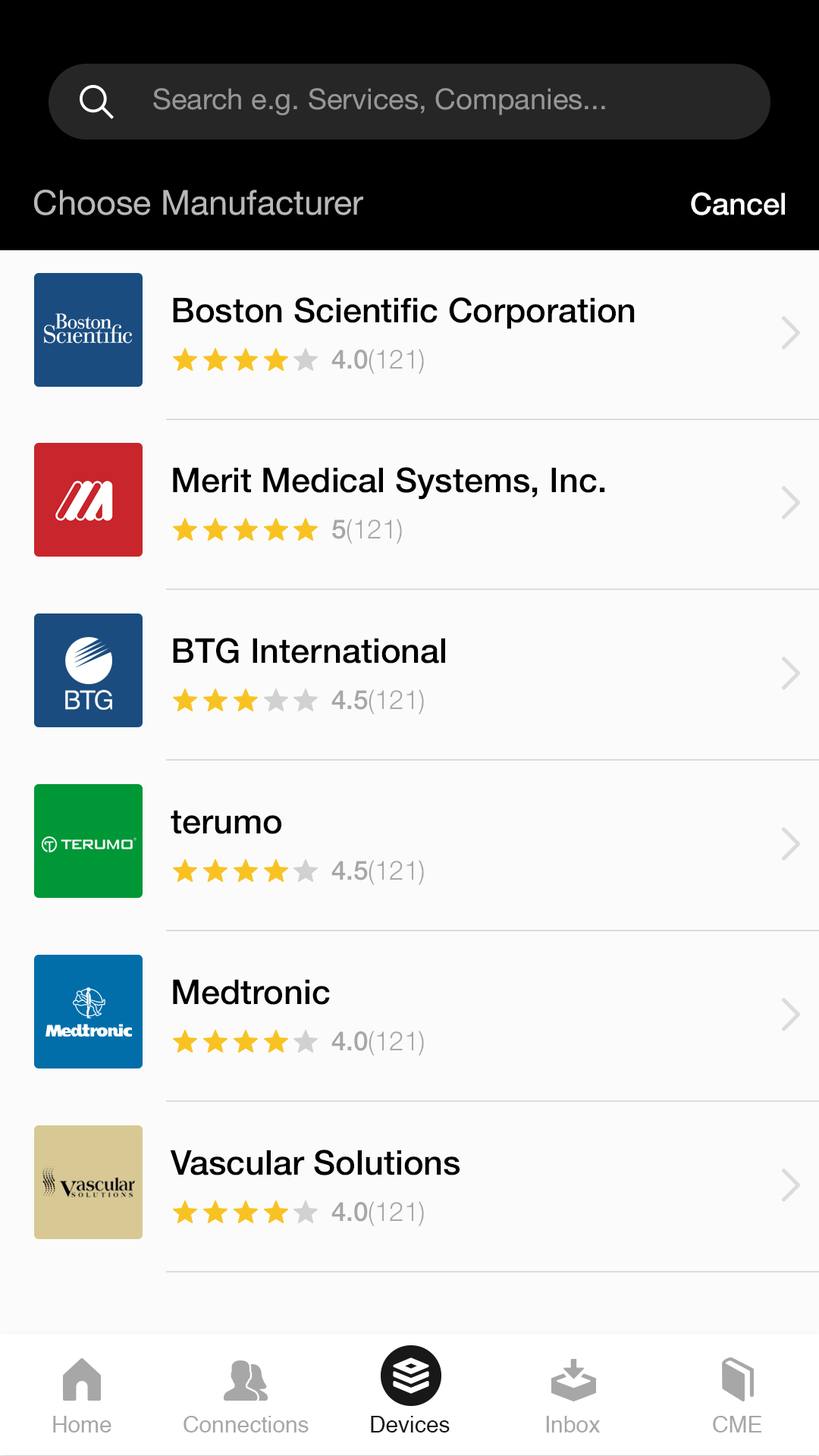
<style>
.page{position:relative;width:819px;height:1456px;background:#fbfbfb}
.page>*{position:absolute;margin:0}
.t1{font:28.8px "HelveticaNeue";color:#969696}
.t2{font:34.1px "HelveticaNeue";color:#b8b8b8}
.t3{font:30.4px "HelveticaNeue-Medium";color:#ffffff}
.t4{font:34.1px "HelveticaNeue-Medium";color:#000000}
.t5{font:26.5px "HelveticaNeue-Light";color:#a7a7a7}
.t6{font:26.5px "HelveticaNeue-Medium";color:#a7a7a7}
.t7{font:22.7px "Helvetica";color:#a7a7a7}
.t8{font:22.7px "Helvetica";color:#181818}
</style>
<div class="page">
<p class="t1" style="left:153px;top:88px;width:452px;height:27px">Search e.g. Services, Companies...</p>
<p class="t2" style="left:34px;top:190px;width:329px;height:25px">Choose Manufacturer</p>
<p class="t3" style="left:691px;top:192px;width:94px;height:23px">Cancel</p>
<p class="t4" style="left:173px;top:297px;width:462px;height:32px">Boston Scientific Corporation</p>
<p class="t5" style="left:331px;top:349px;width:93px;height:25px"><span class="t6">4.0</span>(121)</p>
<p class="t4" style="left:173px;top:467px;width:432px;height:33px">Merit Medical Systems, Inc.</p>
<p class="t5" style="left:332px;top:519px;width:70px;height:25px"><span class="t6">5</span>(121)</p>
<p class="t4" style="left:173px;top:638px;width:272px;height:26px">BTG International</p>
<p class="t5" style="left:331px;top:689px;width:93px;height:25px"><span class="t6">4.5</span>(121)</p>
<p class="t4" style="left:171px;top:810px;width:110px;height:24px">terumo</p>
<p class="t5" style="left:331px;top:860px;width:93px;height:25px"><span class="t6">4.5</span>(121)</p>
<p class="t4" style="left:173px;top:979px;width:157px;height:26px">Medtronic</p>
<p class="t5" style="left:331px;top:1031px;width:93px;height:25px"><span class="t6">4.0</span>(121)</p>
<p class="t4" style="left:170px;top:1150px;width:290px;height:25px">Vascular Solutions</p>
<p class="t5" style="left:331px;top:1201px;width:93px;height:25px"><span class="t6">4.0</span>(121)</p>
<p class="t7" style="left:53px;top:1416px;width:58px;height:16px">Home</p>
<p class="t7" style="left:184px;top:1416px;width:125px;height:16px">Connections</p>
<p class="t8" style="left:371px;top:1416px;width:79px;height:16px">Devices</p>
<p class="t7" style="left:546px;top:1416px;width:54px;height:16px">Inbox</p>
<p class="t7" style="left:713px;top:1416px;width:48px;height:16px">CME</p>
</div>
